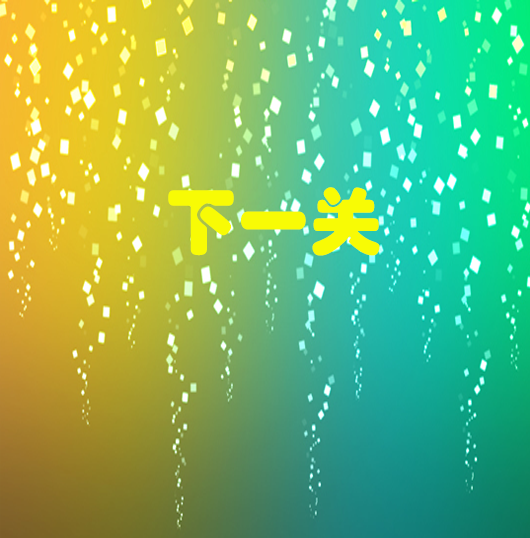
<style>
.page{position:relative;width:530px;height:538px}
.page>*{position:absolute;margin:0}
.t1{font:72px "STHupo";color:#f8fb05}
</style>
<div class="page">
<p class="t1" style="left:168px;top:187px;width:212px;height:69px">下一关</p>
</div>
